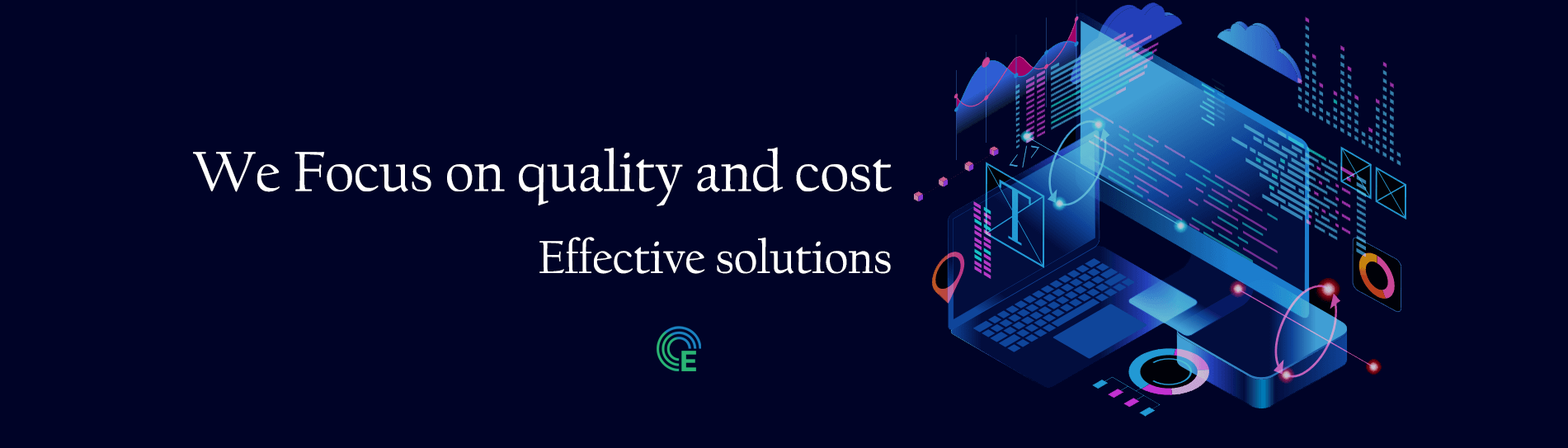
<style>
.page{position:relative;width:1568px;height:448px;background:#000327}
.page>*{position:absolute;margin:0}
.t1{font:58.6px "CalifornianFB-Reg";color:#ffffff}
.t2{font:47.8px "CalifornianFB-Reg";color:#ffffff}
</style>
<div class="page">
<p class="t1" style="left:193px;top:147px;width:699px;height:59px">We Focus on quality and cost</p>
<p class="t2" style="left:539px;top:237px;width:352px;height:37px">Effective solutions</p>
</div>
